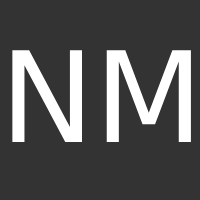
<style>
.page{position:relative;width:200px;height:200px;background:#333333}
.page>*{position:absolute;margin:0}
.t1{font:125.8px "ColonnaMT";color:#ffffff}
</style>
<div class="page">
<p class="t1" style="left:12px;top:50px;width:179px;height:92px">NM</p>
</div>
